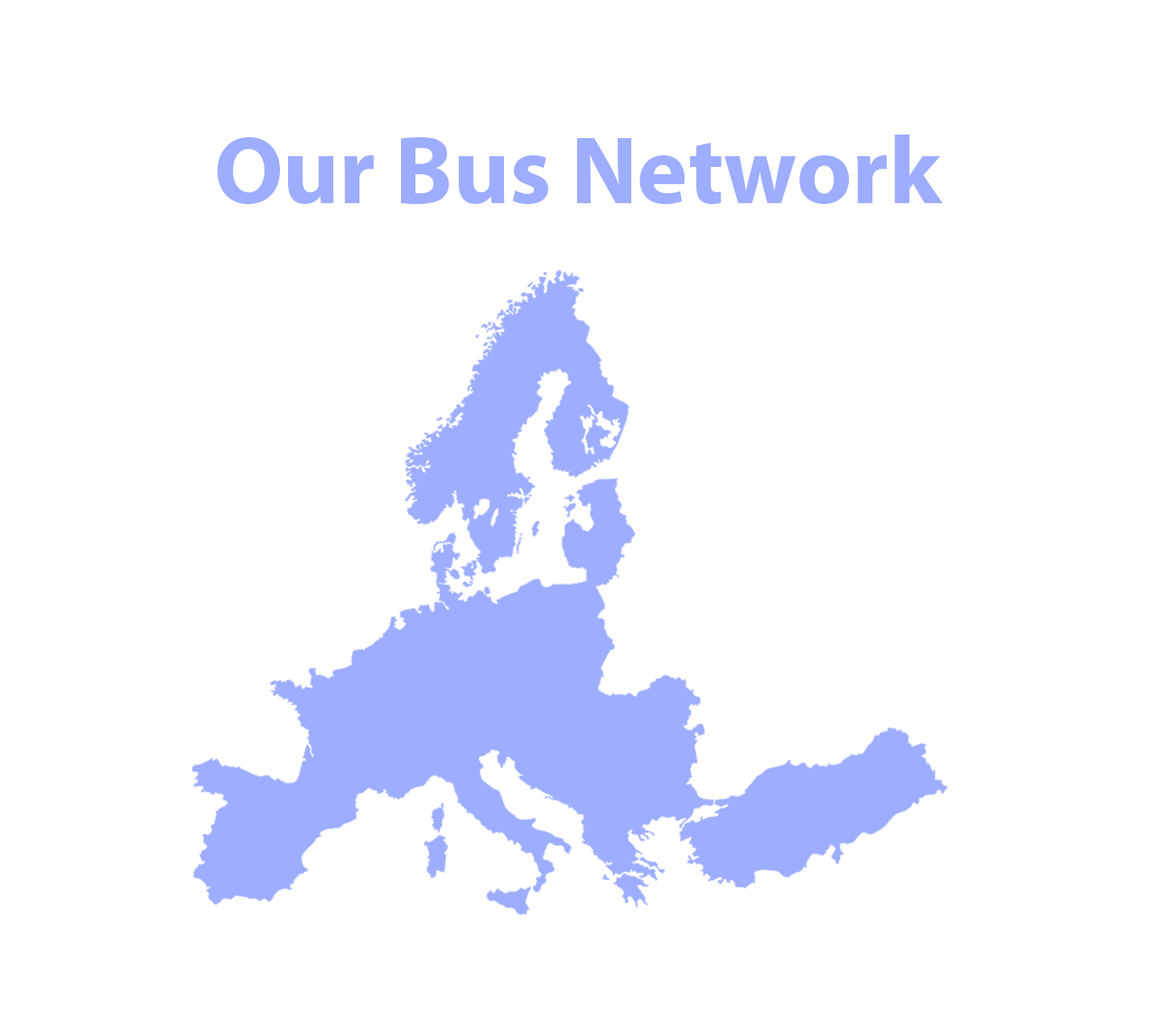
<style>
.page{position:relative;width:1156px;height:1031px;background:#ffffff}
.page>*{position:absolute;margin:0}
.t1{font:96.3px "MyriadPro-Bold";color:#9dadff}
</style>
<div class="page">
<p class="t1" style="left:217px;top:135px;width:726px;height:70px">Our Bus Network</p>
</div>
